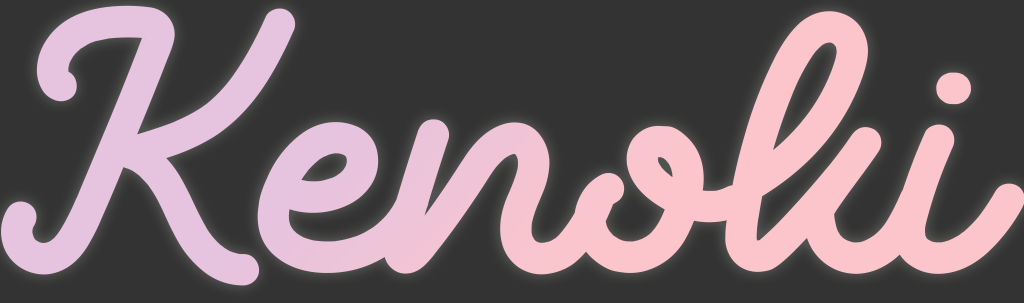
<style>
.page{position:relative;width:1024px;height:303px;background:#333333}
.page>*{position:absolute;margin:0}
.t1{font:310.5px "Bumbbled";color:#f2c4d4}
</style>
<div class="page">
<p class="t1" style="left:1px;top:5px;width:1024px;height:281px">Kenoki</p>
</div>
